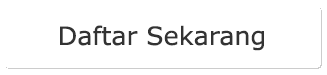
<style>
.page{position:relative;width:327px;height:75px;background:#ffffff}
.page>*{position:absolute;margin:0}
.t1{font:25.3px "Verdana";color:#333333}
</style>
<div class="page">
<p class="t1" style="left:60px;top:25px;width:204px;height:26px">Daftar Sekarang</p>
</div>
